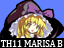
<style>
.page{position:relative;width:64px;height:48px;background:#6380ff}
.page>*{position:absolute;margin:0}
.t1{font:10px "Cambria";color:#ffffff;scale:0.89 1}
</style>
<div class="page">
<p class="t1" style="left:0px;top:40px;width:63px;height:7px">TH11 MARISA B</p>
</div>
